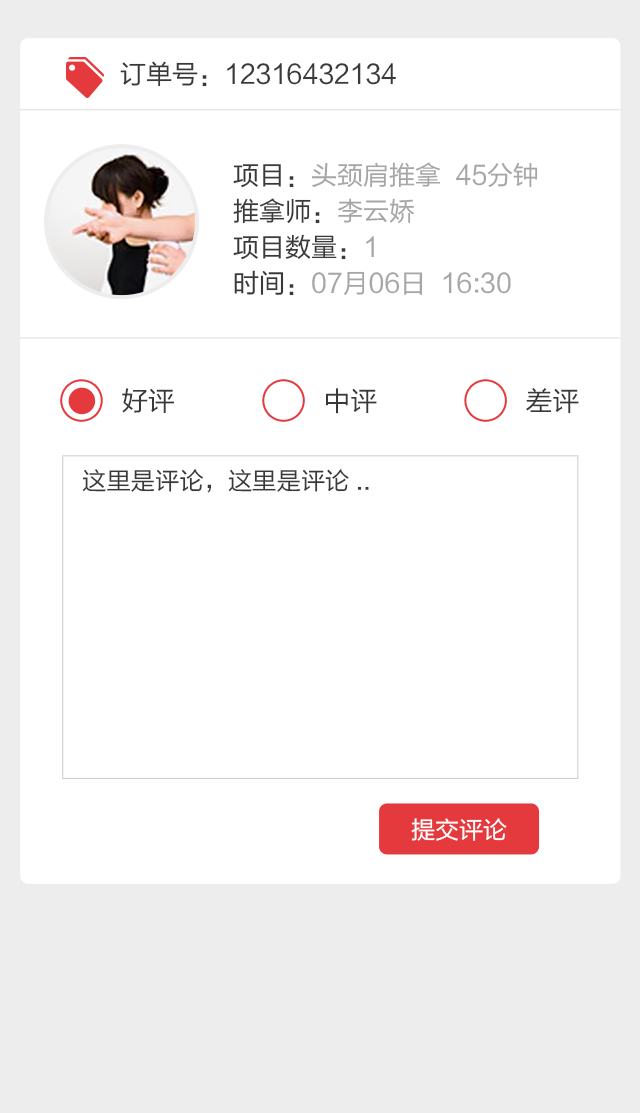
<style>
.page{position:relative;width:640px;height:1113px;background:#ffffff}
.page>*{position:absolute;margin:0}
.t1{font:26px "FZLTHJW--GB1-0";color:#393939}
.t2{font:26px/36px "FZLTHJW--GB1-0";color:#a6a6a6}
.t3{font:26px/36px "FZLTHJW--GB1-0";color:#393939}
.t4{font:26.7px "FZLTHJW--GB1-0";color:#393939}
.t5{font:24.3px "FZLTHJW--GB1-0";color:#393939}
.t6{font:24px "FZLTHJW--GB1-0";color:#ffffff}
</style>
<div class="page">
<p class="t1" style="left:120px;top:61px;width:276px;height:26px">订单号：12316432134</p>
<p class="t2" style="left:233px;top:162px;width:305px;height:134px"><span class="t3">项目：</span>头颈肩推拿  45分钟<br><span class="t3">推拿师：</span>李云娇<br><span class="t3">项目数量：</span>1<br><span class="t3">时间：</span>07月06日  16:30</p>
<p class="t4" style="left:122px;top:388px;width:52px;height:25px">好评</p>
<p class="t4" style="left:326px;top:388px;width:51px;height:26px">中评</p>
<p class="t4" style="left:526px;top:388px;width:53px;height:25px">差评</p>
<p class="t5" style="left:82px;top:469px;width:287px;height:24px">这里是评论，这里是评论..</p>
<p class="t6" style="left:411px;top:818px;width:96px;height:23px">提交评论</p>
</div>
